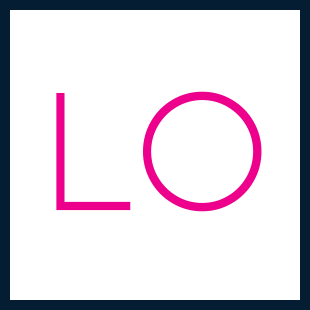
<style>
.page{position:relative;width:310px;height:310px;background:#ffffff}
.page>*{position:absolute;margin:0}
.t1{font:180px "Kiona-Regular";color:#ec008c}
</style>
<div class="page">
<p class="t1" style="left:56px;top:91px;width:206px;height:121px">LO</p>
</div>
